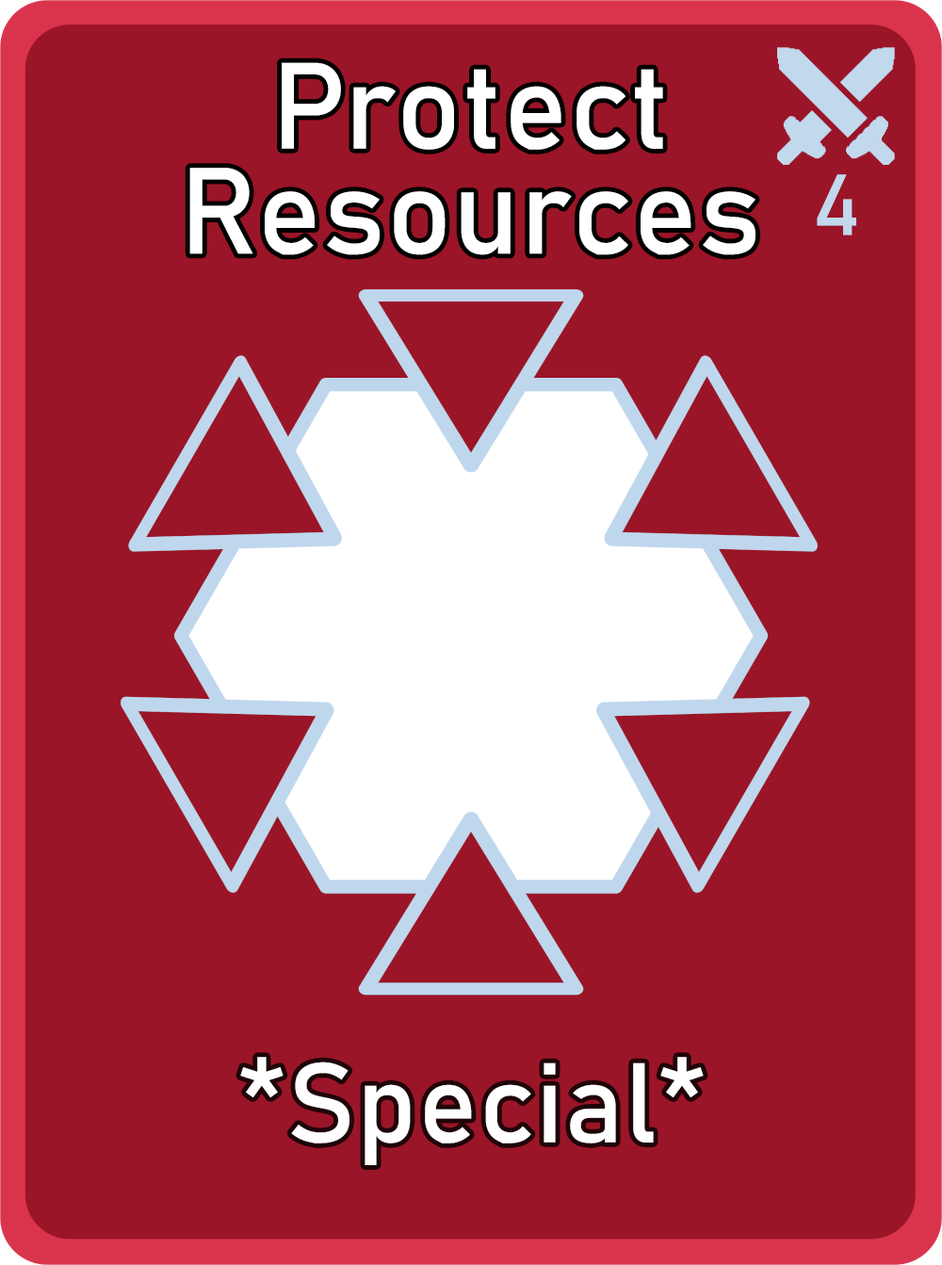
<style>
.page{position:relative;width:942px;height:1265px;background:#9a1527}
.page>*{position:absolute;margin:0}
.t1{font:120.6px/105.1px "Bahnschrift";letter-spacing:0.01em;color:#ffffff}
.t2{font:85px "Bahnschrift";letter-spacing:0.01em;color:#c1d8ed}
.t3{font:111.3px "Bahnschrift";letter-spacing:0.01em;color:#ffffff}
</style>
<div class="page">
<p class="t1" style="left:189px;top:62px;width:567px;height:193px;text-align:center">Protect<br>Resources</p>
<p class="t2" style="left:817px;top:174px;width:40px;height:62px">4</p>
<p class="t3" style="left:240px;top:1057px;width:464px;height:109px">*Special*</p>
</div>
